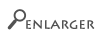
<style>
.page{position:relative;width:100px;height:40px;background:#ffffff}
.page>*{position:absolute;margin:0}
.t1{font:13.9px "LithosPro-Regular";letter-spacing:0.01em;color:#525252}
</style>
<div class="page">
<p class="t1" style="left:26px;top:19px;width:69px;height:10px">enlarger</p>
</div>
